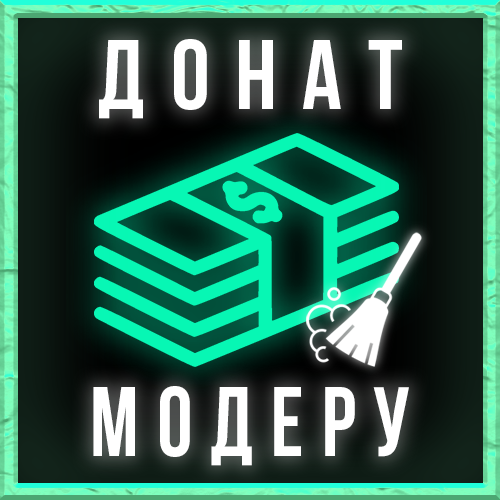
<style>
.page{position:relative;width:500px;height:500px}
.page>*{position:absolute;margin:0}
.t1{font:98px "BebasNeueBold";letter-spacing:0.26em;color:#ffffff}
.t2{font:98px "BebasNeueBold";letter-spacing:0.2em;color:#ffffff;scale:0.91 1}
</style>
<div class="page">
<p class="t1" style="left:99px;top:39px;width:303px;height:80px">донат</p>
<p class="t2" style="left:93px;top:386px;width:316px;height:80px">модеру</p>
</div>
